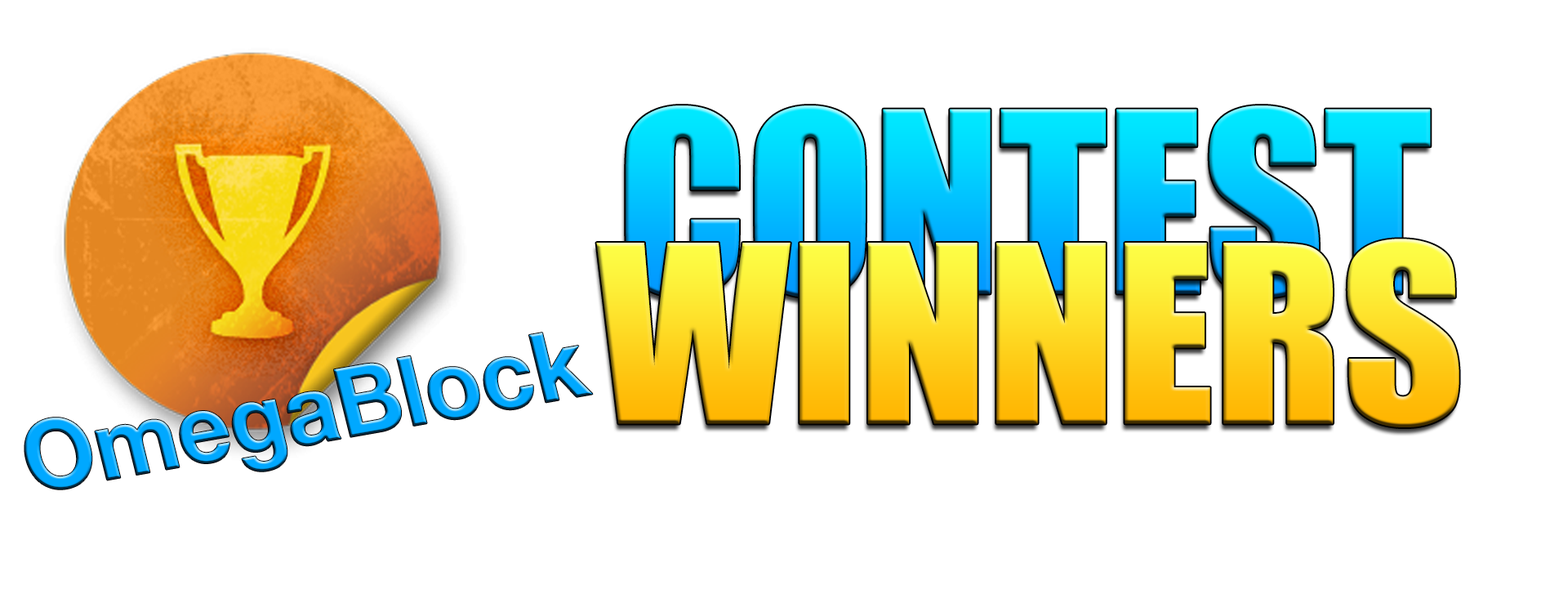
<style>
.page{position:relative;width:1568px;height:603px;background:#ffffff}
.page>*{position:absolute;margin:0}
.t1{font:232.8px "Impact"}
.t2{font:228.5px "Impact";scale:1.04 1}
.t3{font:96.8px "HelveticaNeue-Bold";scale:0.95 1}
</style>
<div class="page">
<p class="t1" style="left:626px;top:105px;width:805px;height:193px">CONTEST</p>
<p class="t2" style="left:596px;top:238px;width:863px;height:189px">WINNERS</p>
<p class="t3" style="left:24px;top:332px;width:569px;height:157px;rotate:-10deg">OmegaBlock</p>
</div>
